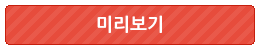
<style>
.page{position:relative;width:260px;height:50px;background:#e74c3c}
.page>*{position:absolute;margin:0}
.t1{font:18px "NanumGothicOTFBold";color:#ffffff}
</style>
<div class="page">
<p class="t1" style="left:97px;top:15px;width:65px;height:18px">미리보기</p>
</div>
